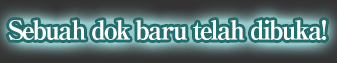
<style>
.page{position:relative;width:337px;height:63px}
.page>*{position:absolute;margin:0}
.t1{font:26px "RyuminPro-ExBold";letter-spacing:-0.08em;color:#ffffff}
</style>
<div class="page">
<p class="t1" style="left:8px;top:20px;width:318px;height:20px">Sebuah dok baru telah dibuka!</p>
</div>
